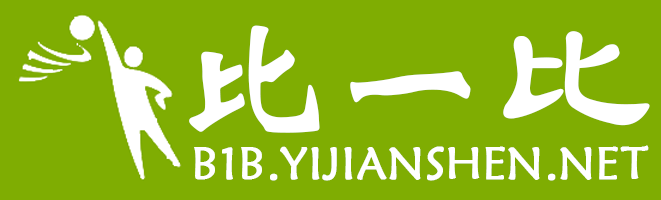
<style>
.page{position:relative;width:661px;height:200px;background:#7fad02}
.page>*{position:absolute;margin:0}
.t1{font:157px "STXinwei";color:#ffffff;font-weight:bold}
.t2{font:157px "LiSu";color:#ffffff;font-weight:bold}
.t3{font:45.4px "STXinwei";color:#ffffff;font-weight:bold}
</style>
<div class="page">
<p class="t1" style="left:189px;top:25px;width:461px;height:108px">比一<span class="t2">比</span></p>
<p class="t3" style="left:194px;top:145px;width:455px;height:36px">B1B.YIJIANSHEN.NET</p>
</div>
